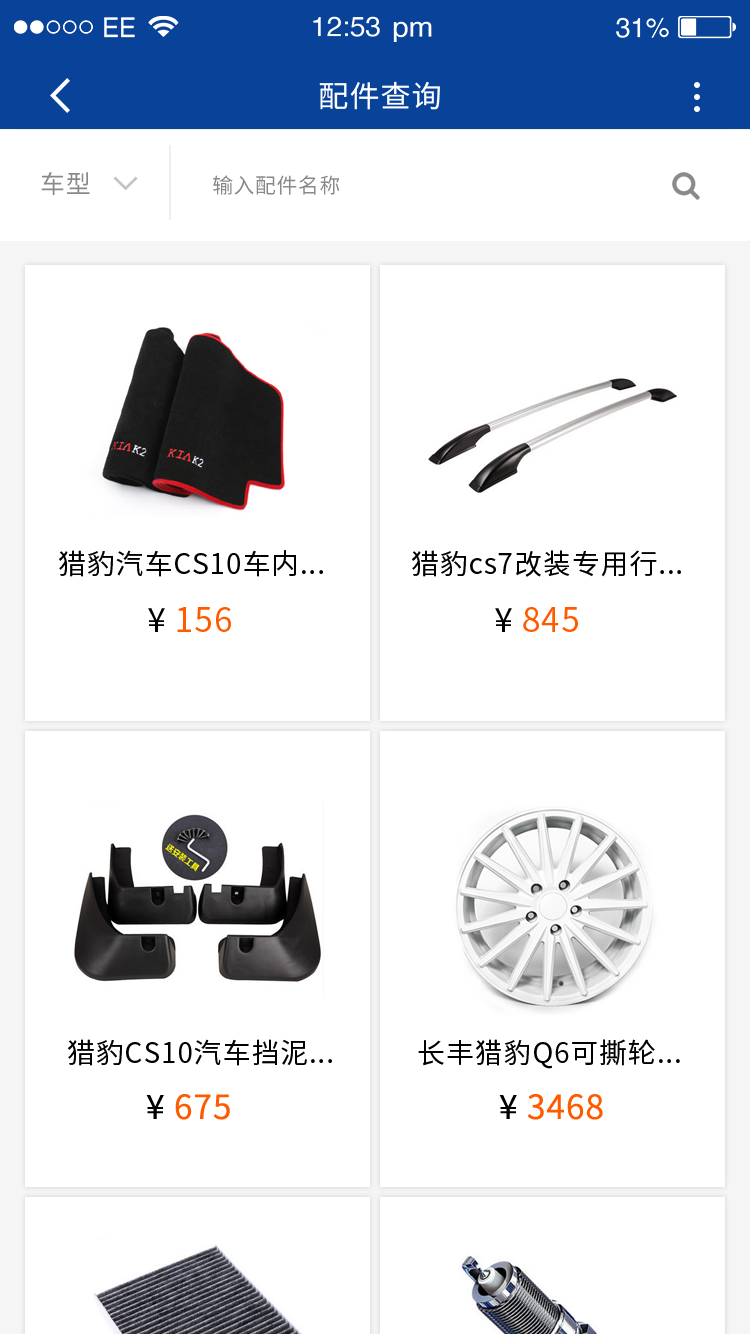
<style>
.page{position:relative;width:750px;height:1334px;background:#ffffff}
.page>*{position:absolute;margin:0}
.t1{font:30px "SourceHanSansCN-Regular";letter-spacing:0.03em;color:#ffffff;text-transform:uppercase}
.t2{font:20.8px "SourceHanSansCN-Regular";letter-spacing:0.03em;color:#898989;text-transform:uppercase}
.t3{font:25px "SourceHanSansCN-Regular";letter-spacing:0.03em;color:#898989;text-transform:uppercase}
.t4{font:28px "SourceHanSansCN-Regular";letter-spacing:0.03em;color:#000000}
.t5{font:33.3px "SourceHanSansCN-Regular";letter-spacing:0.03em;color:#ff5a00}
.t6{font:33.3px "SourceHanSansCN-Regular";letter-spacing:0.03em;color:#000000}
</style>
<div class="page">
<p class="t1" style="left:319px;top:81px;width:121px;height:29px">配件查询</p>
<p class="t2" style="left:41px;top:172px;width:299px;height:23px"><span class="t3">车型                   </span>输入配件名称</p>
<p class="t4" style="left:59px;top:550px;width:264px;height:27px">猎豹汽车CS10车内...</p>
<p class="t4" style="left:412px;top:550px;width:269px;height:27px">猎豹cs7改装专用行...</p>
<p class="t5" style="left:148px;top:607px;width:83px;height:25px"><span class="t6">¥</span> 156</p>
<p class="t5" style="left:495px;top:607px;width:83px;height:25px"><span class="t6">¥</span> 845</p>
<p class="t4" style="left:68px;top:1039px;width:264px;height:27px">猎豹CS10汽车挡泥...</p>
<p class="t4" style="left:418px;top:1039px;width:262px;height:30px">长丰猎豹Q6可撕轮...</p>
<p class="t5" style="left:146px;top:1094px;width:84px;height:26px"><span class="t6">¥</span> 675</p>
<p class="t5" style="left:499px;top:1094px;width:104px;height:26px"><span class="t6">¥</span> 3468</p>
</div>
